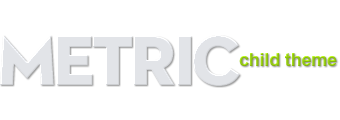
<style>
.page{position:relative;width:340px;height:120px;background:#ffffff}
.page>*{position:absolute;margin:0}
.t1{font:72px "Neutraface2Display-Titling";letter-spacing:-0.05em;color:#e2e4e8}
.t2{font:18px "Arial-BoldMT";letter-spacing:-0.01em;color:#92c415}
</style>
<div class="page">
<p class="t1" style="left:0px;top:35px;width:240px;height:51px">metric</p>
<p class="t2" style="left:239px;top:53px;width:98px;height:13px">child theme</p>
</div>
